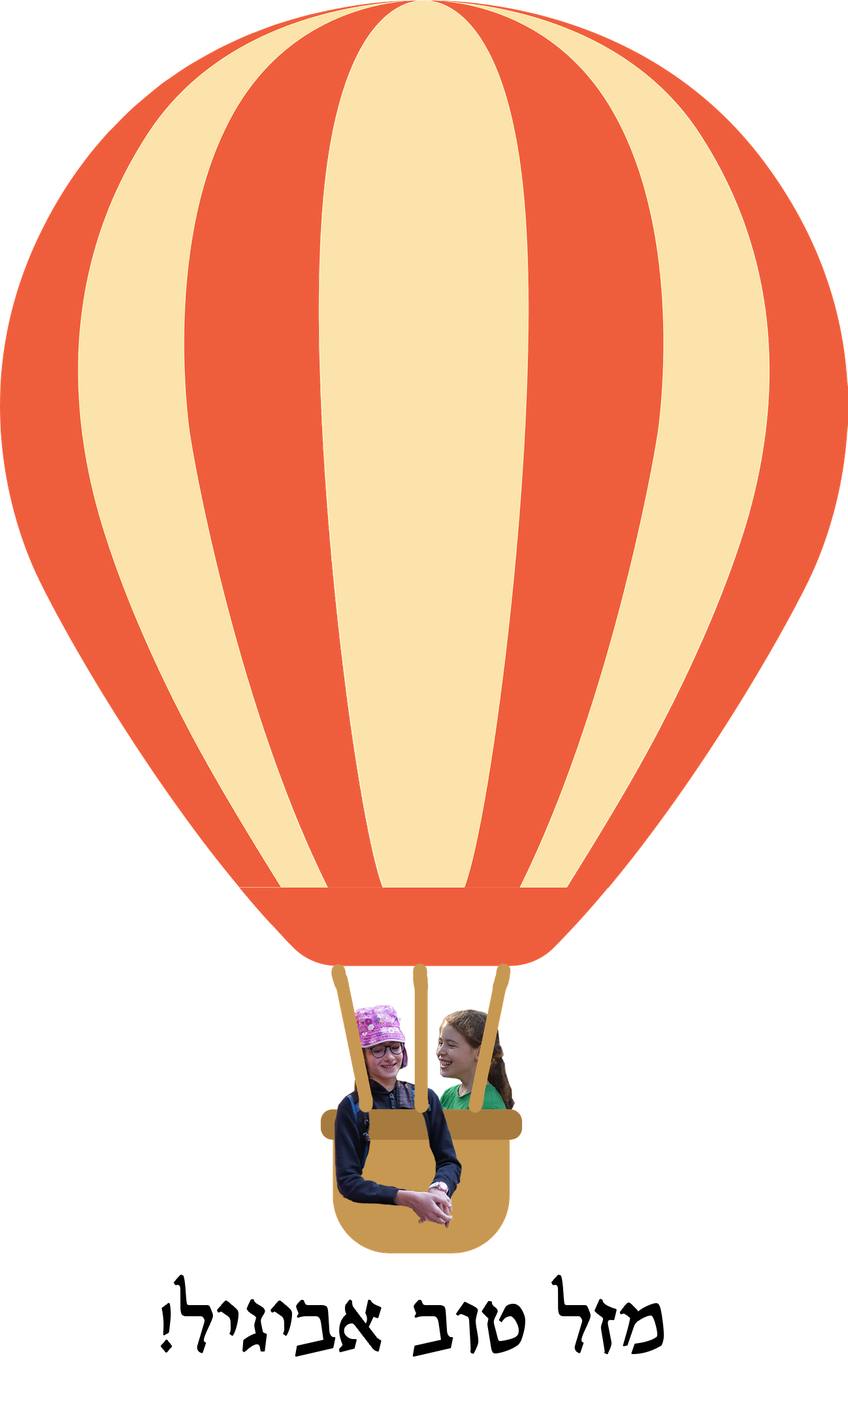
<style>
.page{position:relative;width:848px;height:1407px;background:#ffffff}
.page>*{position:absolute;margin:0}
.t1{font:78.4px "GuttmanAram-Normal";letter-spacing:0.03em;color:#000000}
</style>
<div class="page">
<p class="t1" style="left:161px;top:1275px;width:503px;height:81px">מזל טוב אביגיל!</p>
</div>
